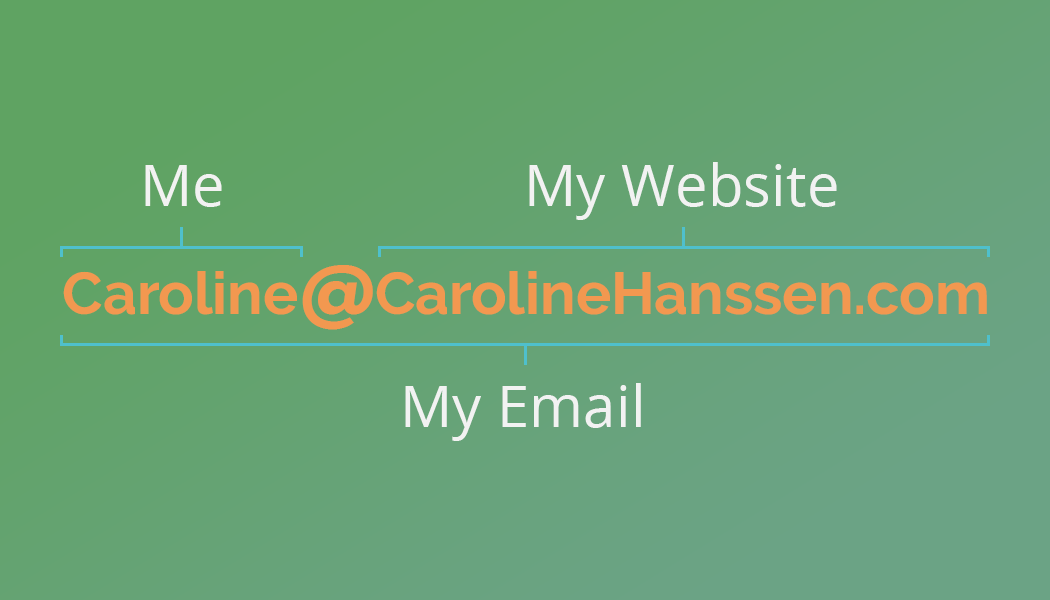
<style>
.page{position:relative;width:1050px;height:600px}
.page>*{position:absolute;margin:0}
.t1{font:58.3px "OpenSans-Regular";color:#f2f2f2}
.t2{font:71.2px "JosefinSans-Bold";color:#f29850}
.t3{font:58.9px "Raleway-Bold";color:#f29850}
</style>
<div class="page">
<p class="t1" style="left:145px;top:165px;width:77px;height:42px">Me</p>
<p class="t1" style="left:529px;top:162px;width:308px;height:58px">My Website</p>
<p class="t2" style="left:302px;top:265px;width:71px;height:65px">@</p>
<p class="t3" style="left:63px;top:271px;width:234px;height:44px">Caroline</p>
<p class="t3" style="left:376px;top:271px;width:611px;height:44px">CarolineHanssen.com</p>
<p class="t1" style="left:405px;top:383px;width:236px;height:58px">My Email</p>
</div>
